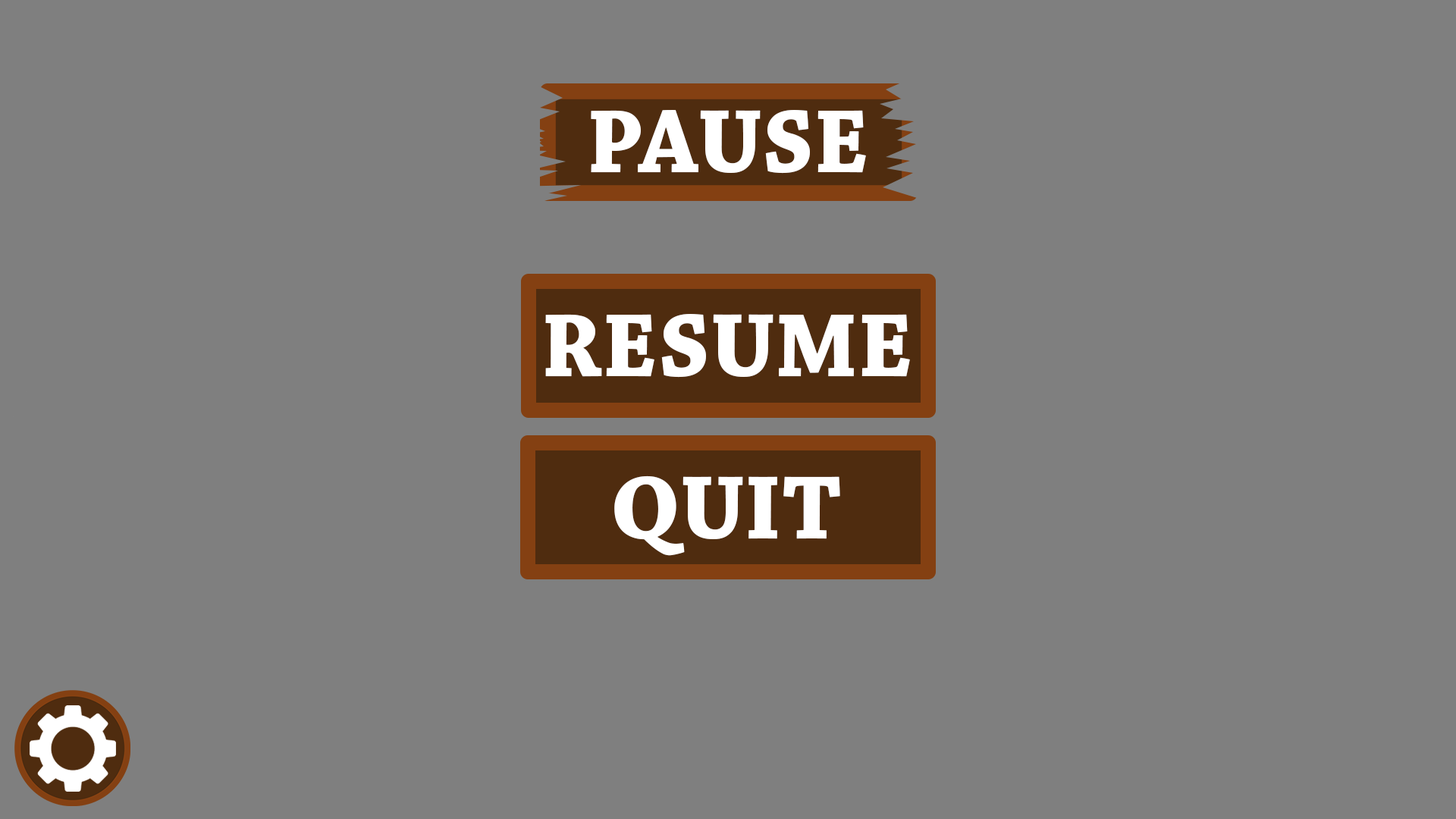
<style>
.page{position:relative;width:1456px;height:819px;background:#7f7f7f}
.page>*{position:absolute;margin:0}
.t1{font:94.8px "ChaparralPro-Bold";color:#ffffff}
</style>
<div class="page">
<p class="t1" style="left:591px;top:110px;width:275px;height:64px">PAUSE</p>
<p class="t1" style="left:545px;top:314px;width:365px;height:64px">RESUME</p>
<p class="t1" style="left:614px;top:475px;width:226px;height:81px">QUIT</p>
</div>
